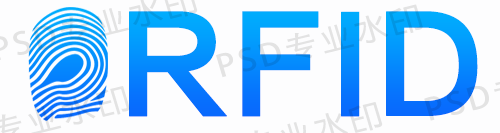
<style>
.page{position:relative;width:500px;height:133px;background:#fdfdfe}
.page>*{position:absolute;margin:0}
.t1{font:30.2px "AdobeFanHeitiStd-Bold";letter-spacing:0.1em;scale:1.09 1}
.t2{font:30.2px "AdobeHeitiStd-Regular";letter-spacing:0.1em;scale:1.09 1}
.t3{font:128.5px "FZLTCHJW--GB1-0";font-weight:bold}
</style>
<div class="page">
<p class="t1" style="left:216px;top:4px;width:207px;height:74px;rotate:-14deg">PSD<span class="t2">专</span>业水印</p>
<p class="t3" style="left:129px;top:11px;width:349px;height:106px">RFID</p>
</div>
